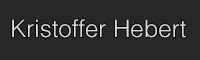
<style>
.page{position:relative;width:200px;height:60px;background:#272727}
.page>*{position:absolute;margin:0}
.t1{font:24px "Helvetica-Light";color:#e0e1e1}
</style>
<div class="page">
<p class="t1" style="left:12px;top:19px;width:174px;height:19px">Kristoffer Hebert</p>
</div>
